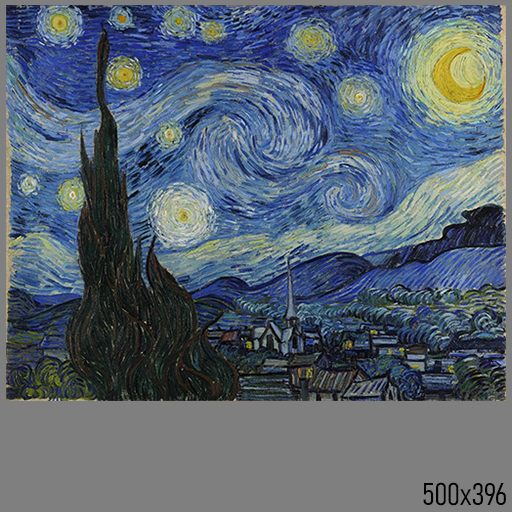
<style>
.page{position:relative;width:512px;height:512px;background:#7f7f7f}
.page>*{position:absolute;margin:0}
.t1{font:31px "Bahnschrift-LightCondensed";color:#000000}
</style>
<div class="page">
<p class="t1" style="left:423px;top:482px;width:83px;height:24px">500x396</p>
</div>
